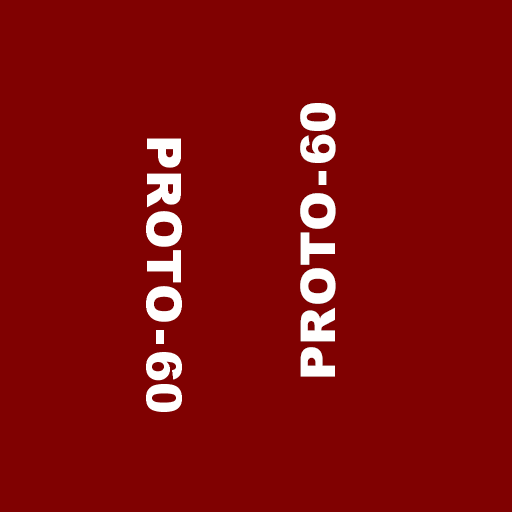
<style>
.page{position:relative;width:512px;height:512px;background:#800101}
.page>*{position:absolute;margin:0}
.t1{font:48px "Arial-Black";color:#fffffe}
</style>
<div class="page">
<p class="t1" style="left:300px;top:103px;width:36px;height:274px;rotate:-90deg">PROTO-60</p>
</div>
